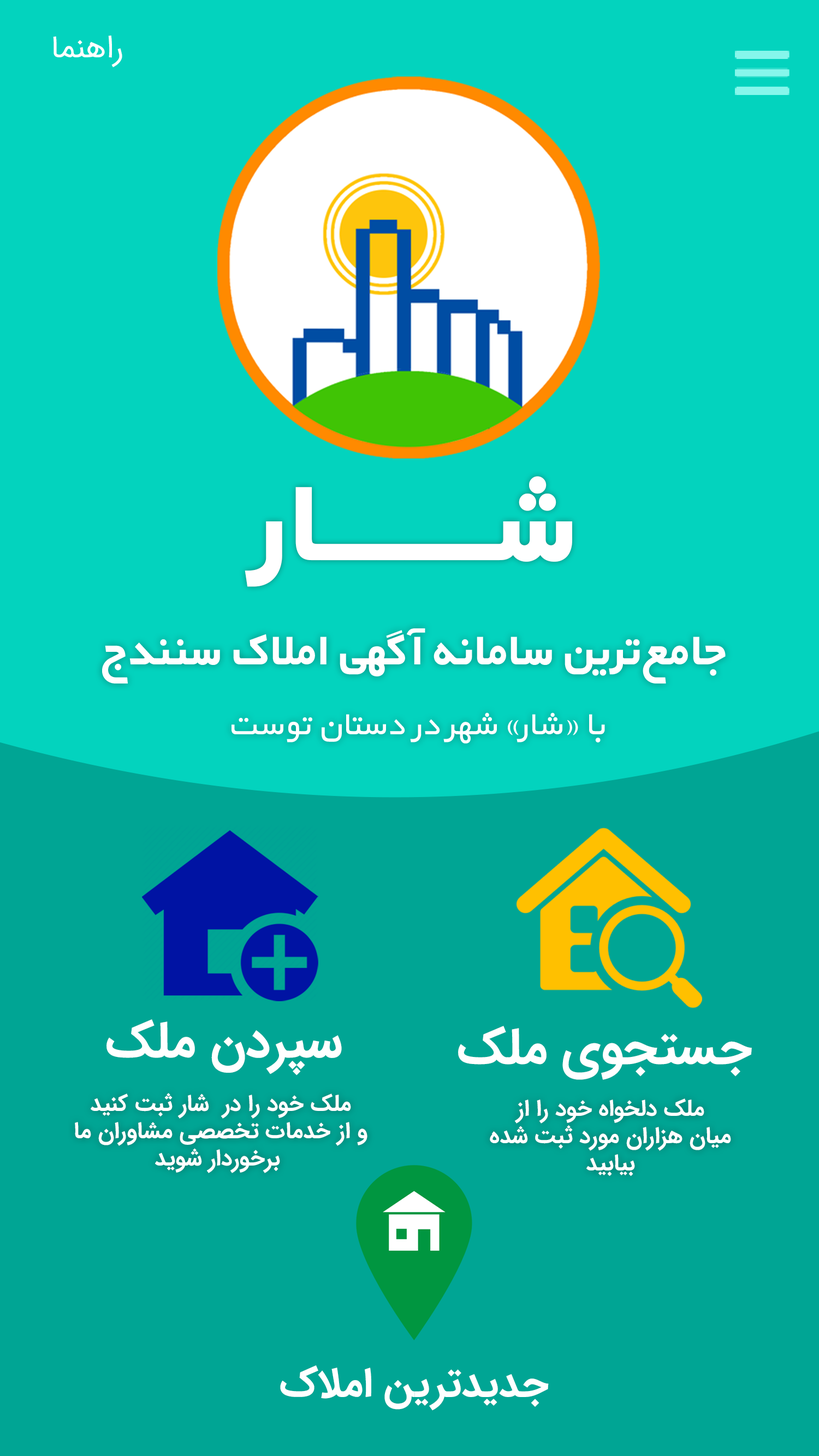
<style>
.page{position:relative;width:819px;height:1456px;background:#03d3be}
.page>*{position:absolute;margin:0}
.t1{font:31.8px "IRANSansFaNum";color:#ffffff}
.t2{font:141.8px "wYekan-Bold";color:#ffffff}
.t3{font:50.4px "IRANSansFaNum-Bold";color:#ffffff}
.t4{font:22.7px "IRANSansFaNum-Bold";color:#ffffff}
.t5{font:40.9px "IRANSansFaNum-Bold";color:#ffffff}
</style>
<div class="page">
<p class="t1" style="left:53px;top:35px;width:69px;height:32px">راهنما</p>
<p class="t2" style="left:245px;top:476px;width:327px;height:111px">شــــــــــــار</p>
<p class="t3" style="left:106px;top:1019px;width:236px;height:57px">سپردن ملک</p>
<p class="t3" style="left:458px;top:1026px;width:294px;height:54px">جستجوی ملک</p>
<p class="t4" style="left:75px;top:1093px;width:292px;height:80px;text-align:center">ملک خود را در  شار ثبت کنید <br>و از خدمات تخصصی مشاوران ما <br>برخوردار شوید</p>
<p class="t4" style="left:490px;top:1098px;width:241px;height:78px;text-align:center">ملک دلخواه خود را از<br>میان هزاران مورد ثبت شده<br>بیابید</p>
<p class="t5" style="left:280px;top:1365px;width:269px;height:46px">جدیدترین املاک</p>
</div>
